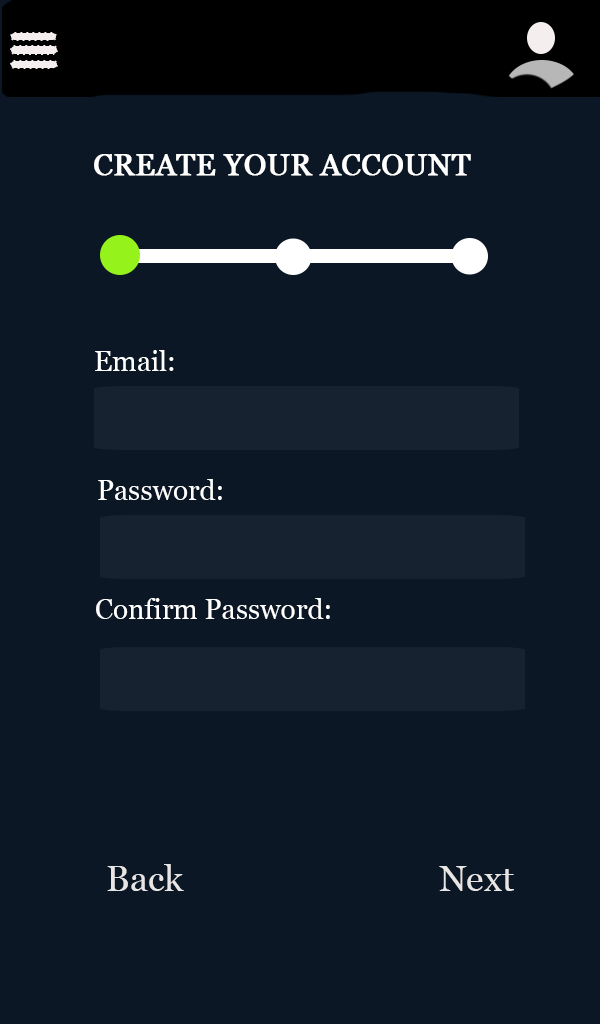
<style>
.page{position:relative;width:600px;height:1024px;background:#0c1726}
.page>*{position:absolute;margin:0}
.t1{font:30px "Georgia";color:#ffffff;text-transform:uppercase;font-weight:bold}
.t2{font:28px "Georgia";color:#ffffff}
.t3{font:28px "Georgia";color:#ffffff;text-transform:uppercase}
.t4{font:36px "Georgia";color:#e8e5e5}
</style>
<div class="page">
<p class="t1" style="left:94px;top:154px;width:377px;height:22px">Create Your account</p>
<p class="t2" style="left:95px;top:350px;width:79px;height:21px"><span class="t3">E</span>mail<span class="t3">:</span></p>
<p class="t2" style="left:98px;top:479px;width:124px;height:21px">Password:</p>
<p class="t2" style="left:96px;top:598px;width:234px;height:21px">Confirm Password:</p>
<p class="t4" style="left:107px;top:864px;width:77px;height:27px">Back</p>
<p class="t4" style="left:439px;top:866px;width:75px;height:25px">Next</p>
</div>
